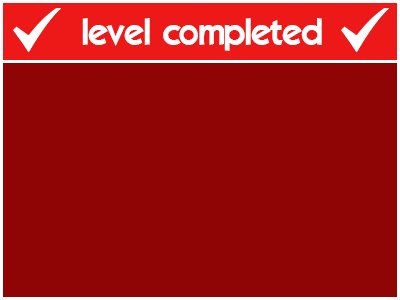
<style>
.page{position:relative;width:400px;height:300px;background:#8f0404}
.page>*{position:absolute;margin:0}
.t1{font:36px "ELEGANCE";color:#ffffff}
</style>
<div class="page">
<p class="t1" style="left:82px;top:18px;width:240px;height:33px">level completed</p>
</div>
